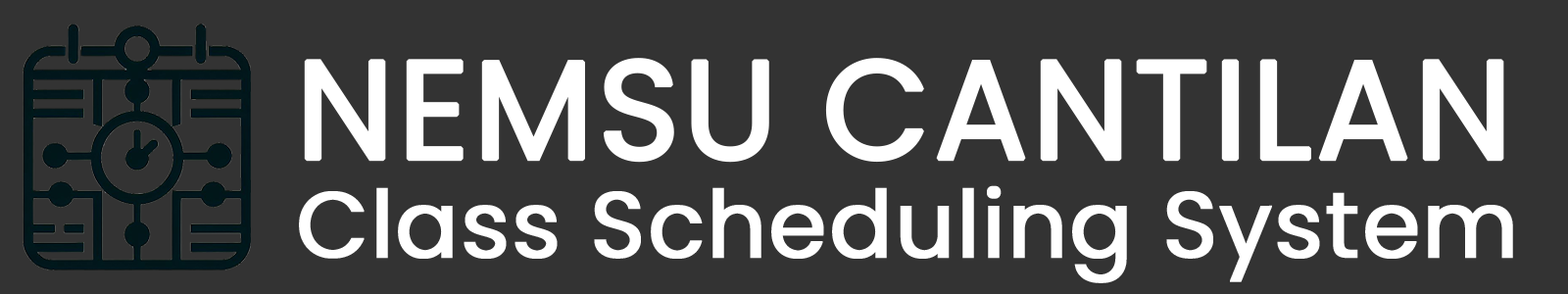
<style>
.page{position:relative;width:1568px;height:294px;background:#333333}
.page>*{position:absolute;margin:0}
.t1{font:139.7px "Poppins-Regular";color:#ffffff;font-weight:bold}
.t2{font:93.1px "Poppins-Regular";color:#ffffff;font-weight:bold}
</style>
<div class="page">
<p class="t1" style="left:304px;top:58px;width:1200px;height:105px">NEMSU CANTILAN</p>
<p class="t2" style="left:299px;top:185px;width:1214px;height:98px">Class Scheduling System</p>
</div>
